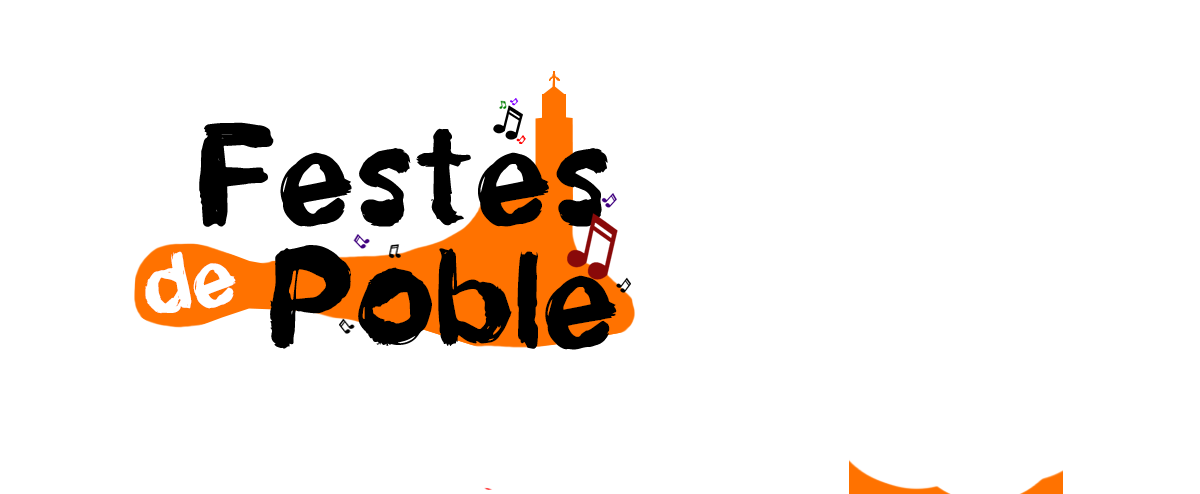
<style>
.page{position:relative;width:1200px;height:494px;background:#ffffff}
.page>*{position:absolute;margin:0}
.t1{font:120px "NewroticRegular";color:#000000}
.t2{font:72px "NewroticRegular";color:#ffffff}
</style>
<div class="page">
<p class="t1" style="left:199px;top:122px;width:409px;height:105px">Festes</p>
<p class="t1" style="left:270px;top:245px;width:347px;height:105px">Poble</p>
<p class="t2" style="left:145px;top:251px;width:91px;height:63px;rotate:-10deg">de</p>
</div>
